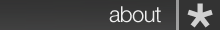
<style>
.page{position:relative;width:220px;height:30px}
.page>*{position:absolute;margin:0}
.t1{font:22px "HelveticaNeue-Light";letter-spacing:-0.025em;color:#eeeeee}
</style>
<div class="page">
<p class="t1" style="left:109px;top:6px;width:52px;height:17px">about</p>
</div>
